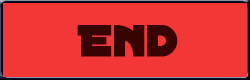
<style>
.page{position:relative;width:250px;height:80px;background:#f33636}
.page>*{position:absolute;margin:0}
.t1{font:48px "DistantGalaxy";letter-spacing:0.01em;color:#380303;font-weight:bold}
</style>
<div class="page">
<p class="t1" style="left:77px;top:25px;width:101px;height:32px">End</p>
</div>
